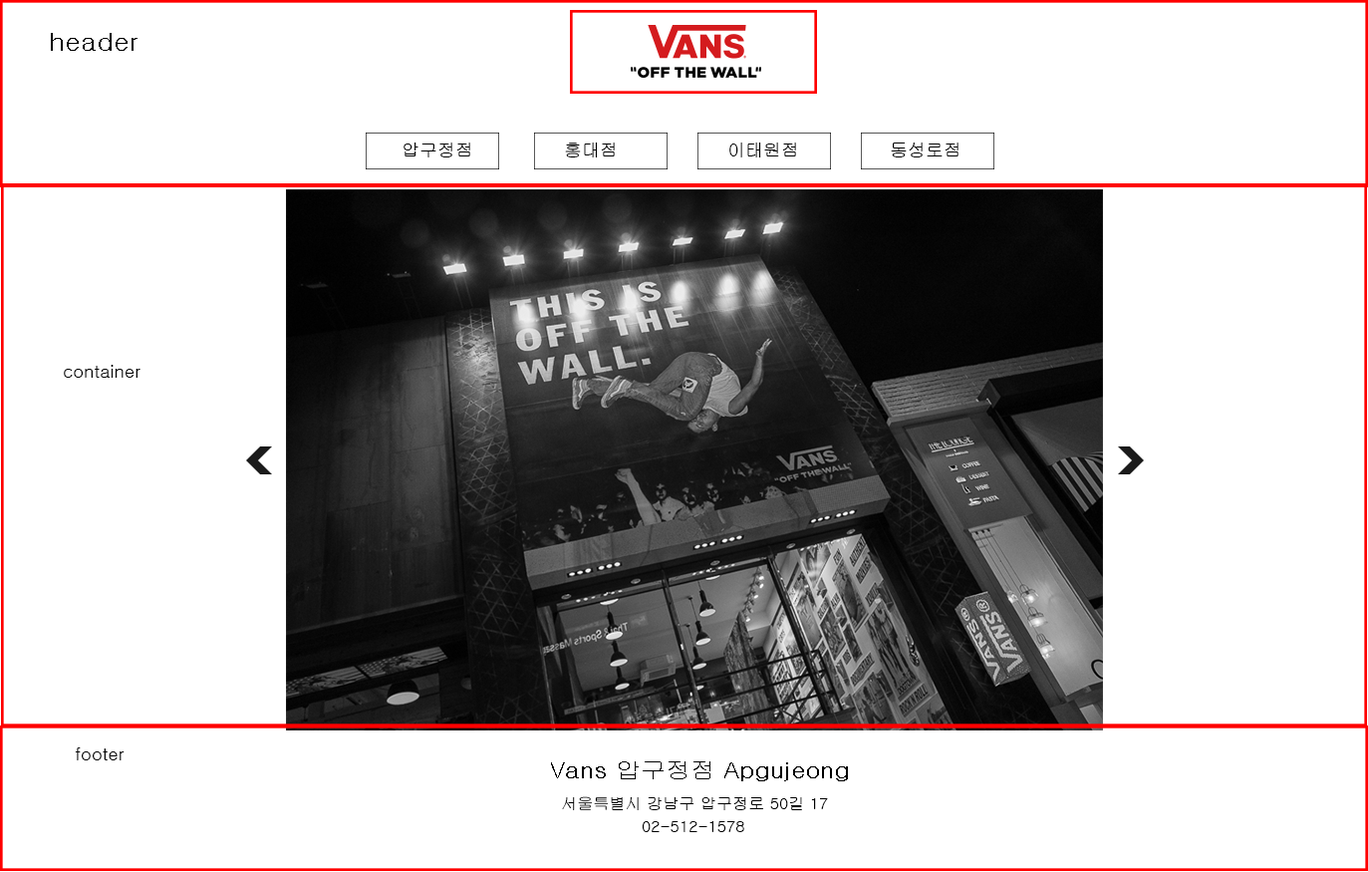
<style>
.page{position:relative;width:1368px;height:872px;background:#ffffff}
.page>*{position:absolute;margin:0}
.t1{font:25.4px "Gulim";color:#000000;scale:1.1 1}
.t2{font:17.9px "Gulim";color:#000000}
.t3{font:22.6px "Gulim";color:#000000;scale:1.11 1}
.t4{font:15.9px "Gulim";color:#000000}
</style>
<div class="page">
<p class="t1" style="left:51px;top:33px;width:86px;height:18px">header</p>
<p class="t2" style="left:403px;top:142px;width:67px;height:15px">압구정점</p>
<p class="t2" style="left:565px;top:142px;width:50px;height:16px">홍대점</p>
<p class="t2" style="left:729px;top:142px;width:67px;height:15px">이태원점</p>
<p class="t2" style="left:891px;top:142px;width:67px;height:15px">동성로점</p>
<p class="t2" style="left:64px;top:365px;width:76px;height:13px">container</p>
<p class="t2" style="left:75px;top:747px;width:50px;height:13px">footer</p>
<p class="t3" style="left:551px;top:761px;width:297px;height:20px">Vans 압구정점 Apgujeong</p>
<p class="t4" style="left:562px;top:796px;width:266px;height:14px">서울특별시 강남구 압구정로 50길 17</p>
<p class="t4" style="left:642px;top:821px;width:102px;height:11px">02-512-1578</p>
</div>
